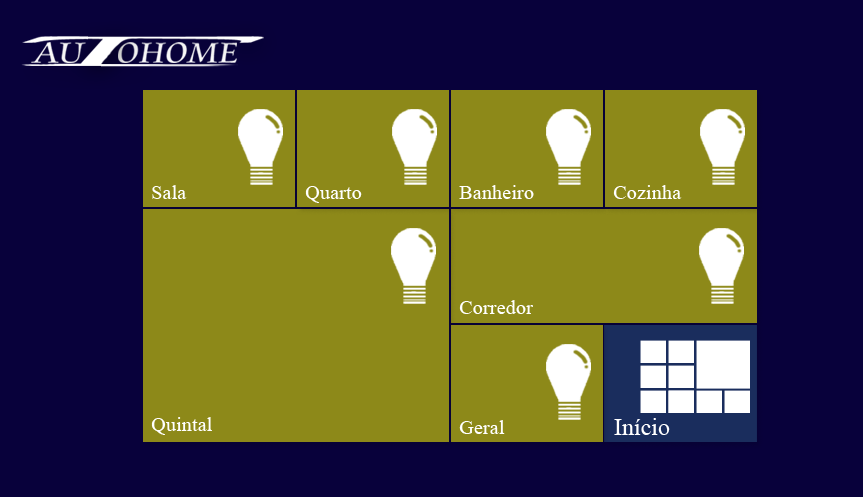
<style>
.page{position:relative;width:863px;height:497px;background:#08013b}
.page>*{position:absolute;margin:0}
.t1{font:31px "CataneoBT-Regular";color:#ffffff;scale:1.13 1}
.t2{font:20.4px "TimesNewRomanPSMT";color:#ffffff}
.t3{font:24px "TimesNewRomanPSMT";color:#ffffff}
</style>
<div class="page">
<p class="t1" style="left:118px;top:42px;width:119px;height:21px">OHOME</p>
<p class="t2" style="left:152px;top:185px;width:35px;height:14px">Sala</p>
<p class="t2" style="left:459px;top:185px;width:75px;height:14px">Banheiro</p>
<p class="t2" style="left:613px;top:185px;width:69px;height:14px">Cozinha</p>
<p class="t2" style="left:305px;top:186px;width:57px;height:17px">Quarto</p>
<p class="t2" style="left:459px;top:300px;width:74px;height:14px">Corredor</p>
<p class="t2" style="left:151px;top:417px;width:61px;height:18px">Quintal</p>
<p class="t2" style="left:459px;top:420px;width:46px;height:14px">Geral</p>
<p class="t3" style="left:614px;top:418px;width:56px;height:17px">Início</p>
</div>
